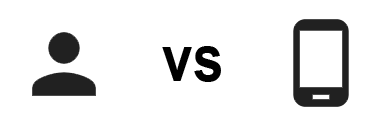
<style>
.page{position:relative;width:384px;height:128px;background:#ffffff}
.page>*{position:absolute;margin:0}
.t1{font:64px "Arial-BoldMT";color:#000000;scale:0.86 1}
</style>
<div class="page">
<p class="t1" style="left:162px;top:46px;width:59px;height:36px">vs</p>
</div>
